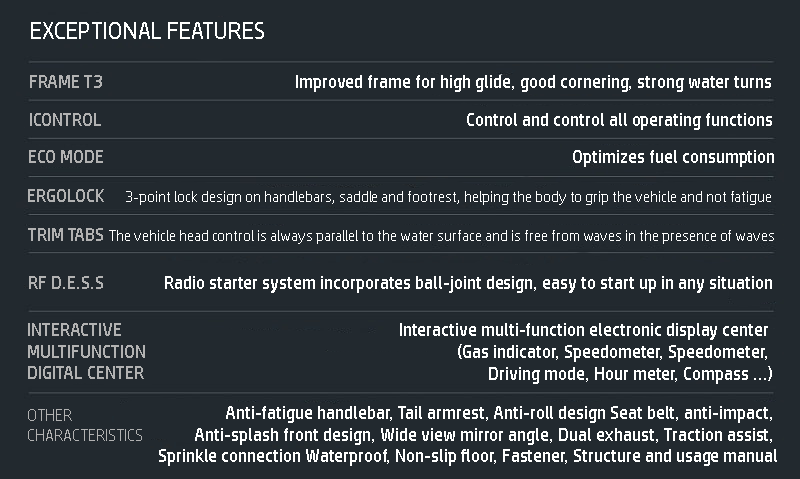
<style>
.page{position:relative;width:800px;height:479px;background:#22292f}
.page>*{position:absolute;margin:0}
.t1{font:24px "HPSimplified-Regular";color:#ffffff}
.t2{font:18px "HPSimplified-Regular";color:#ffffff}
.t3{font:18px "HPSimplified-Regular";color:#b2b2b2}
.t4{font:15px "HPSimplified-Regular";color:#ffffff}
.t5{font:16px "HPSimplified-Regular";color:#b2b2b2}
</style>
<div class="page">
<p class="t1" style="left:31px;top:22px;width:233px;height:17px">EXCEPTIONAL FEATURES</p>
<p class="t2" style="left:30px;top:75px;width:741px;height:17px"><span class="t3">FRAME T3</span>                                                Improved frame for high glide, good cornering, strong water turns</p>
<p class="t2" style="left:30px;top:113px;width:742px;height:17px"><span class="t3">ICONTROL</span>                                                                                           Control and control all operating functions</p>
<p class="t2" style="left:29px;top:150px;width:745px;height:17px"><span class="t3">ECO MODE</span>                                                                                                                     Optimizes fuel consumption</p>
<p class="t4" style="left:28px;top:189px;width:743px;height:16px"><span class="t3">ERGOLOCK     </span>3-point lock design on handlebars, saddle and footrest, helping the body to grip the vehicle and not fatigue</p>
<p class="t4" style="left:28px;top:228px;width:746px;height:16px"><span class="t3">TRIM TABS </span>The vehicle head control is always parallel to the water surface and is free from waves in the presence of waves</p>
<p class="t2" style="left:29px;top:276px;width:743px;height:17px"><span class="t3">RF D.E.S.S</span>               Radio starter system incorporates ball-joint design, easy to start up in any situation</p>
<p class="t3" style="left:28px;top:323px;width:117px;height:56px">INTERACTIVE <br>MULTIFUNCTION <br>DIGITAL CENTER</p>
<p class="t2" style="left:400px;top:323px;width:372px;height:61px;text-align:right">Interactive multi-function electronic display center <br>(Gas indicator, Speedometer, Speedometer, <br>Driving mode, Hour meter, Compass ...)</p>
<p class="t5" style="left:28px;top:409px;width:114px;height:32px">OTHER <br>CHARACTERISTICS</p>
<p class="t2" style="left:159px;top:406px;width:618px;height:60px;text-align:right">Anti-fatigue handlebar, Tail armrest, Anti-roll design Seat belt, anti-impact, <br>Anti-splash front design, Wide view mirror angle, Dual exhaust, Traction assist, <br>Sprinkle connection Waterproof, Non-slip floor, Fastener, Structure and usage manual</p>
</div>
